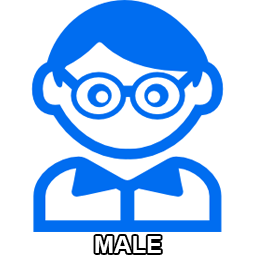
<style>
.page{position:relative;width:256px;height:256px;background:#ffffff}
.page>*{position:absolute;margin:0}
.t1{font:24px "Arial-BoldMT";color:#ffffff}
</style>
<div class="page">
<p class="t1" style="left:95px;top:236px;width:66px;height:17px">MALE</p>
</div>
